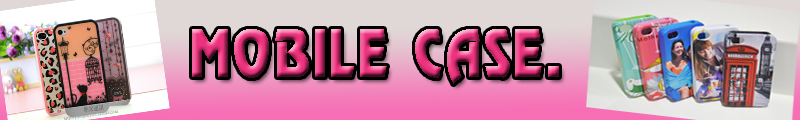
<style>
.page{position:relative;width:800px;height:120px}
.page>*{position:absolute;margin:0}
.t1{font:100px "DSNJumPar"}
</style>
<div class="page">
<p class="t1" style="left:192px;top:29px;width:367px;height:55px">MOBILE CASE.</p>
</div>
